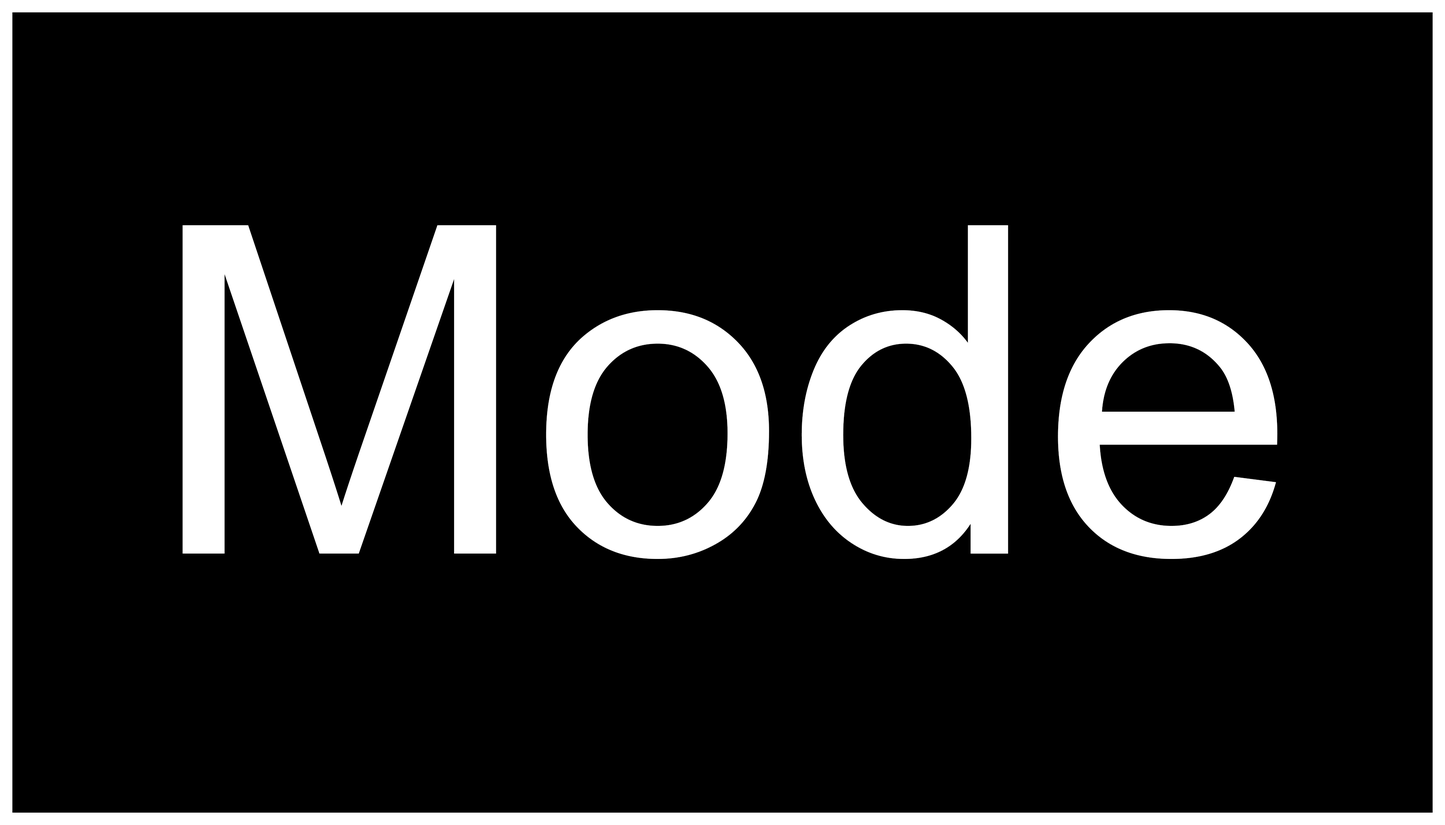
<style>
.page{position:relative;width:1445px;height:825px;background:#000000}
.page>*{position:absolute;margin:0}
.t1{font:458.6px "ArialMT";color:#ffffff}
</style>
<div class="page">
<p class="t1" style="left:182px;top:225px;width:1095px;height:334px">Mode</p>
</div>
